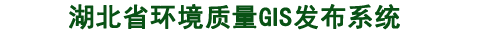
<style>
.page{position:relative;width:477px;height:34px;background:#ffffff}
.page>*{position:absolute;margin:0}
.t1{font:26px "SimHei";letter-spacing:0.1em;color:#095215;font-weight:bold}
</style>
<div class="page">
<p class="t1" style="left:69px;top:4px;width:331px;height:26px">湖北省环境质量GIS发布系统</p>
</div>
